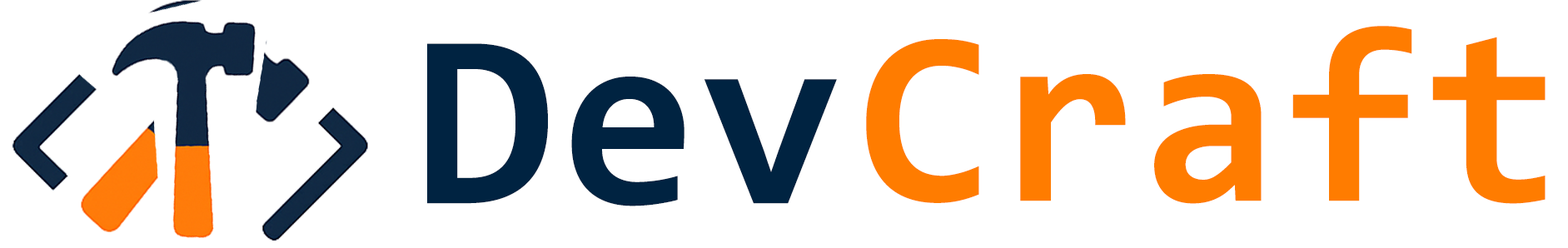
<style>
.page{position:relative;width:1568px;height:248px;background:#ffffff}
.page>*{position:absolute;margin:0}
.t1{font:249.8px "Consolas-Bold";letter-spacing:0.02em;color:#ff7c00}
.t2{font:249.8px "Consolas-Bold";letter-spacing:0.02em;color:#002341}
</style>
<div class="page">
<p class="t1" style="left:866px;top:26px;width:680px;height:178px">Craft</p>
<p class="t2" style="left:427px;top:43px;width:410px;height:164px">Dev</p>
</div>
